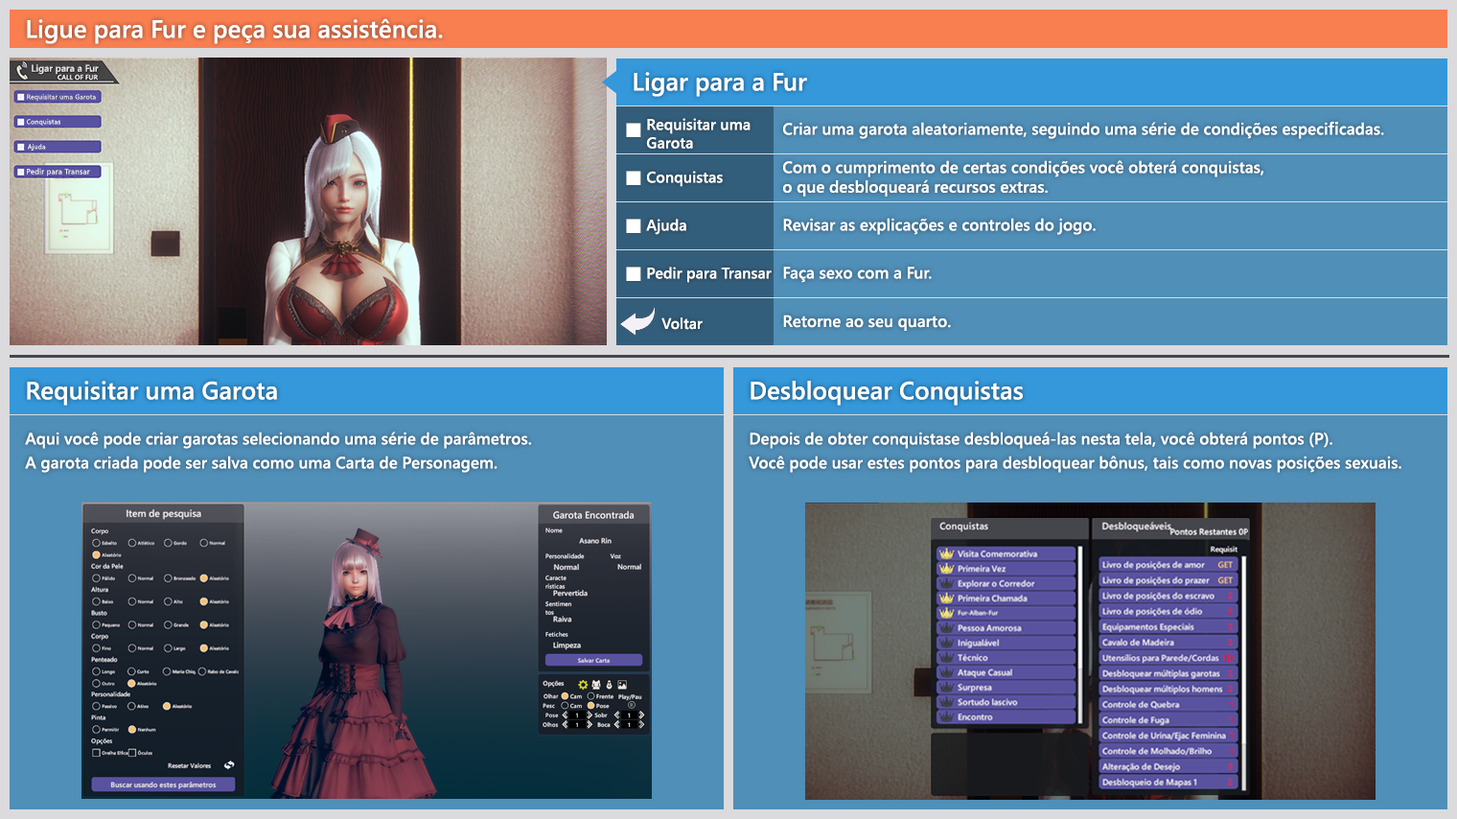
<style>
.page{position:relative;width:1457px;height:819px}
.page>*{position:absolute;margin:0}
.t1{font:24.9px "YuGothicUI-Semibold";color:#ffffff}
.t2{font:9.6px "YuGothicUI-Semibold";color:#e2e0e2}
.t3{font:6.7px "YuGothicUI-Regular";letter-spacing:0.025em;color:#e2e0e2}
.t4{font:6.7px "YuGothicUI-Regular";letter-spacing:0.025em;color:#eeeeee}
.t5{font:15.3px "YuGothicUI-Semibold";color:#ffffff}
.t6{font:16.3px "YuGothicUI-Semibold";color:#ffffff}
.t7{font:7.7px "YuGothicUI-Regular";letter-spacing:0.025em;color:#eeeeee}
.t8{font:16.6px "YuGothicUI-Semibold";color:#ffffff}
.t9{font:16.3px/24px "YuGothicUI-Semibold";color:#ffffff}
</style>
<div class="page">
<p class="t1" style="left:27px;top:18px;width:416px;height:26px">Ligue para Fur e peça sua assistência.</p>
<p class="t2" style="left:32px;top:64px;width:67px;height:11px">Ligar para a Fur</p>
<p class="t1" style="left:634px;top:72px;width:173px;height:25px">Ligar para a Fur</p>
<p class="t3" style="left:27px;top:94px;width:69px;height:8px">Requisitar uma Garota</p>
<p class="t4" style="left:26px;top:119px;width:34px;height:7px">Conquistas</p>
<p class="t5" style="left:646px;top:118px;width:104px;height:31px">Requisitar uma <br>Garota</p>
<p class="t6" style="left:783px;top:121px;width:601px;height:18px">Criar uma garota aleatoriamente, seguindo uma série de condições especificadas.</p>
<p class="t4" style="left:28px;top:144px;width:18px;height:7px">Ajuda</p>
<p class="t6" style="left:783px;top:160px;width:481px;height:36px">Com o cumprimento de certas condições você obterá conquistas, <br>o que desbloqueará recursos extras.</p>
<p class="t7" style="left:27px;top:168px;width:63px;height:8px">Pedir para Transar</p>
<p class="t5" style="left:647px;top:171px;width:76px;height:16px">Conquistas</p>
<p class="t5" style="left:646px;top:219px;width:40px;height:16px">Ajuda</p>
<p class="t6" style="left:783px;top:218px;width:313px;height:17px">Revisar as explicações e controles do jogo.</p>
<p class="t5" style="left:647px;top:266px;width:125px;height:17px">Pedir para Transar</p>
<p class="t6" style="left:783px;top:266px;width:149px;height:17px">Faça sexo com a Fur.</p>
<p class="t5" style="left:661px;top:317px;width:42px;height:13px">Voltar</p>
<p class="t8" style="left:783px;top:314px;width:168px;height:17px">Retorne ao seu quarto.</p>
<p class="t1" style="left:27px;top:381px;width:250px;height:24px">Requisitar uma Garota</p>
<p class="t1" style="left:750px;top:381px;width:273px;height:24px">Desbloquear Conquistas</p>
<p class="t9" style="left:25px;top:431px;width:507px;height:42px">Aqui você pode criar garotas selecionando uma série de parâmetros.<br>A garota criada pode ser salva como uma Carta de Personagem.</p>
<p class="t9" style="left:749px;top:431px;width:652px;height:42px">Depois de obter conquistase desbloqueá-las nesta tela, você obterá pontos (P).<br>Você pode usar estes pontos para desbloquear bônus, tais como novas posições sexuais.</p>
</div>
